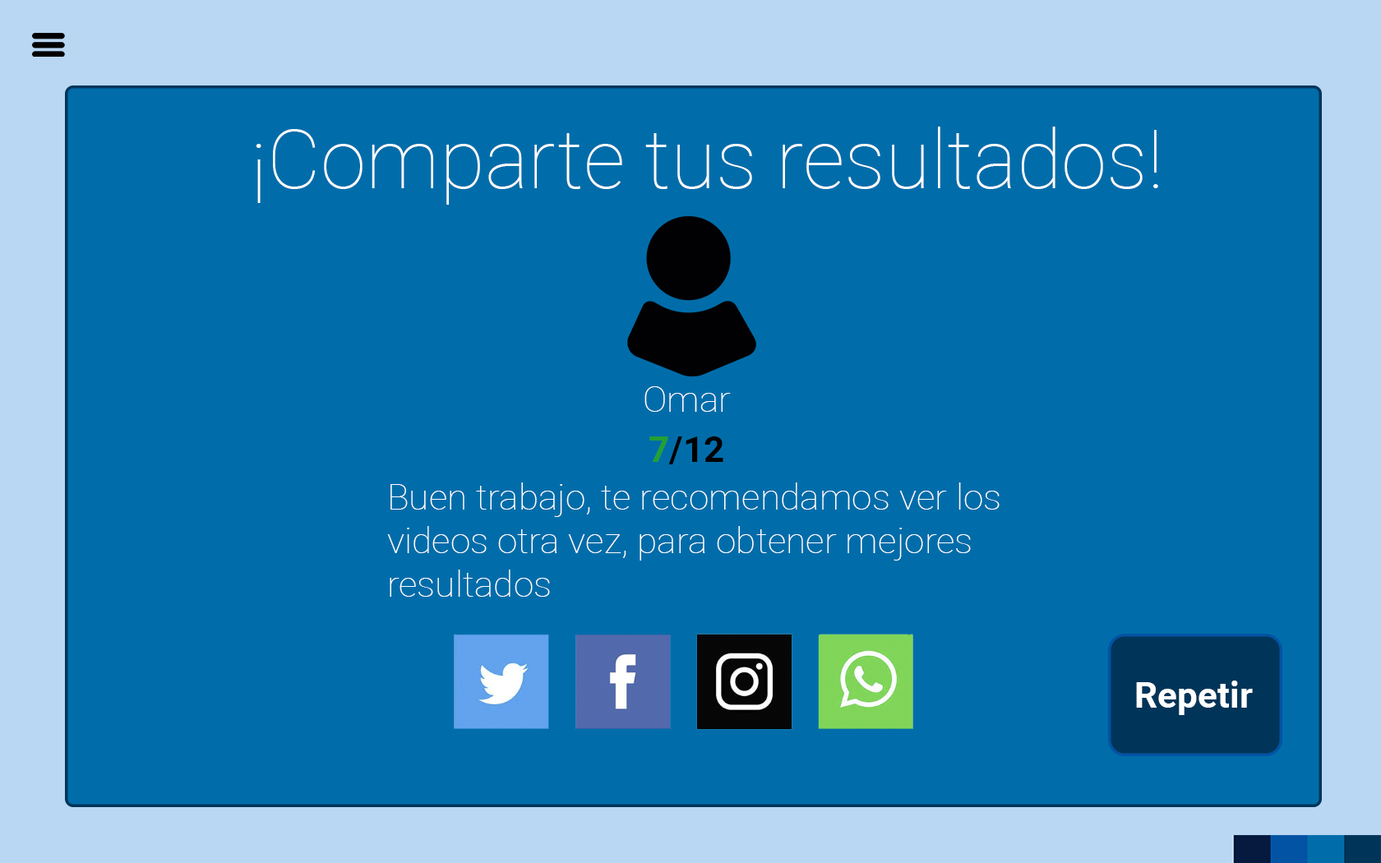
<style>
.page{position:relative;width:1381px;height:863px;background:#006daa}
.page>*{position:absolute;margin:0}
.t1{font:82.2px "Roboto-Thin";color:#ffffff}
.t2{font:36.5px "Roboto-Thin";color:#ffffff}
.t3{font:36.5px "Roboto-Bold";color:#000000}
.t4{font:36.5px "Roboto-Bold";color:#22a034}
.t5{font:36.5px "Roboto-Bold";color:#ffffff}
</style>
<div class="page">
<p class="t1" style="left:256px;top:127px;width:902px;height:78px">¡Comparte tus resultados!</p>
<p class="t2" style="left:645px;top:386px;width:86px;height:26px">Omar</p>
<p class="t3" style="left:650px;top:437px;width:74px;height:28px"><span class="t4">7</span>/12</p>
<p class="t2" style="left:387px;top:483px;width:613px;height:114px">Buen trabajo, te recomendamos ver los<br>videos otra vez, para obtener mejores<br>resultados</p>
<p class="t5" style="left:1136px;top:681px;width:117px;height:34px">Repetir</p>
</div>
